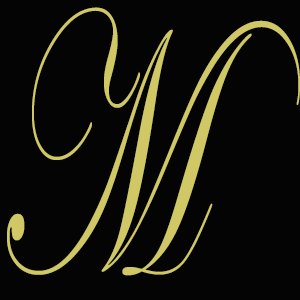
<style>
.page{position:relative;width:300px;height:300px;background:#040404}
.page>*{position:absolute;margin:0}
.t1{font:374.1px "EdwardianScriptITC";color:#cfc864;scale:0.55 1}
</style>
<div class="page">
<p class="t1" style="left:7px;top:7px;width:293px;height:269px">M</p>
</div>
